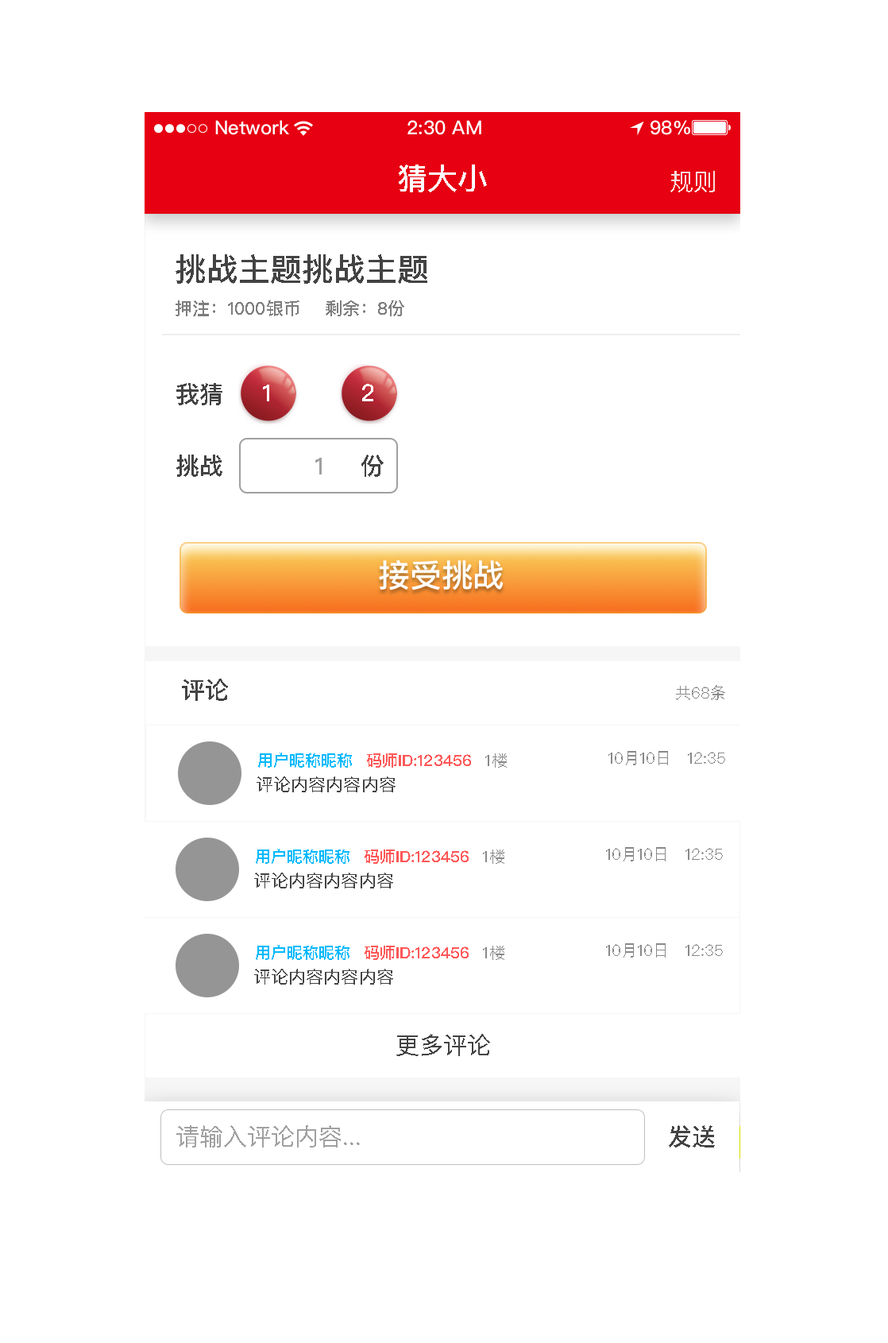
<style>
.page{position:relative;width:888px;height:1343px;background:#ffffff}
.page>*{position:absolute;margin:0}
.t1{font:30.2px "PingFangSC-Medium";color:#ffffff;text-transform:uppercase}
.t2{font:23.8px "PingFangSC-Regular";color:#faddde;text-transform:uppercase}
.t3{font:31.8px "PingFangSC-Medium";color:#434343;text-transform:uppercase}
.t4{font:17.5px "PingFangSC-Medium";color:#7d7d7d;text-transform:uppercase}
.t5{font:23.8px "PingFangSC-Medium";color:#434343;text-transform:uppercase}
.t6{font:23.8px "PingFangSC-Medium";color:#ffffff;text-transform:uppercase}
.t7{font:23.8px "PingFangSC-Medium";color:#a0a0a0;text-transform:uppercase}
.t8{font:15.9px "PingFangSC-Regular";color:#898989;text-transform:uppercase}
.t9{font:15.9px "PingFangSC-Medium";color:#01b9fd;text-transform:uppercase}
.t10{font:15.9px "PingFangSC-Medium";color:#ff5858;text-transform:uppercase}
.t11{font:17.5px "PingFangSC-Regular";color:#434343;text-transform:uppercase}
.t12{font:23.8px "PingFangSC-Regular";color:#434343;text-transform:uppercase}
.t13{font:23.8px "PingFangSC-Regular";color:#a0a0a0;text-transform:uppercase}
</style>
<div class="page">
<p class="t1" style="left:399px;top:164px;width:88px;height:28px">猜大小</p>
<p class="t2" style="left:670px;top:171px;width:45px;height:21px">规则</p>
<p class="t3" style="left:176px;top:254px;width:251px;height:30px">挑战主题挑战主题</p>
<p class="t4" style="left:176px;top:300px;width:123px;height:16px">押注：1000银币</p>
<p class="t4" style="left:326px;top:300px;width:78px;height:16px">剩余：8份</p>
<p class="t5" style="left:176px;top:383px;width:46px;height:22px">我猜</p>
<p class="t6" style="left:263px;top:385px;width:6px;height:16px">1</p>
<p class="t6" style="left:362px;top:384px;width:11px;height:17px">2</p>
<p class="t5" style="left:176px;top:454px;width:46px;height:23px">挑战</p>
<p class="t7" style="left:315px;top:458px;width:7px;height:16px">1</p>
<p class="t5" style="left:361px;top:454px;width:23px;height:23px">份</p>
<p class="t5" style="left:182px;top:678px;width:46px;height:23px">评论</p>
<p class="t8" style="left:676px;top:685px;width:49px;height:15px">共68条</p>
<p class="t9" style="left:258px;top:752px;width:94px;height:15px">用户昵称昵称</p>
<p class="t10" style="left:367px;top:753px;width:104px;height:14px">码师ID:123456</p>
<p class="t8" style="left:485px;top:753px;width:22px;height:14px">1楼</p>
<p class="t8" style="left:609px;top:751px;width:116px;height:14px">10月10日   12:35</p>
<p class="t11" style="left:257px;top:776px;width:139px;height:16px">评论内容内容内容</p>
<p class="t9" style="left:256px;top:848px;width:94px;height:16px">用户昵称昵称</p>
<p class="t10" style="left:365px;top:849px;width:104px;height:15px">码师ID:123456</p>
<p class="t8" style="left:483px;top:849px;width:21px;height:15px">1楼</p>
<p class="t8" style="left:606px;top:847px;width:117px;height:14px">10月10日   12:35</p>
<p class="t11" style="left:254px;top:872px;width:139px;height:16px">评论内容内容内容</p>
<p class="t9" style="left:256px;top:945px;width:94px;height:15px">用户昵称昵称</p>
<p class="t10" style="left:365px;top:945px;width:104px;height:15px">码师ID:123456</p>
<p class="t8" style="left:483px;top:945px;width:21px;height:15px">1楼</p>
<p class="t8" style="left:606px;top:943px;width:117px;height:14px">10月10日   12:35</p>
<p class="t11" style="left:254px;top:968px;width:139px;height:16px">评论内容内容内容</p>
<p class="t12" style="left:396px;top:1034px;width:94px;height:22px">更多评论</p>
<p class="t13" style="left:176px;top:1125px;width:184px;height:22px">请输入评论内容...</p>
<p class="t5" style="left:669px;top:1125px;width:46px;height:22px">发送</p>
</div>
